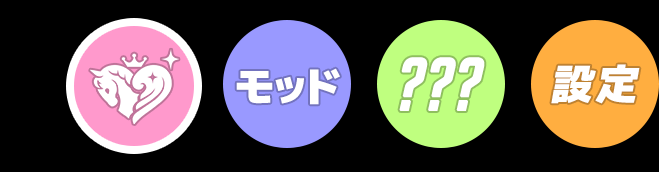
<style>
.page{position:relative;width:659px;height:172px;background:#000000}
.page>*{position:absolute;margin:0}
.t1{font:72px "BigNoodleTitling-Oblique";color:#ffffff;font-weight:bold;font-style:italic}
.t2{font:42px "mplus-2p-black";letter-spacing:0.1em;color:#ffffff;font-style:italic}
.t3{font:42px "mplus-2p-black";letter-spacing:-0.05em;color:#ffffff}
</style>
<div class="page">
<p class="t1" style="left:399px;top:57px;width:86px;height:54px">???</p>
<p class="t2" style="left:551px;top:64px;width:89px;height:40px">設定</p>
<p class="t3" style="left:236px;top:68px;width:104px;height:37px">モッド</p>
</div>
